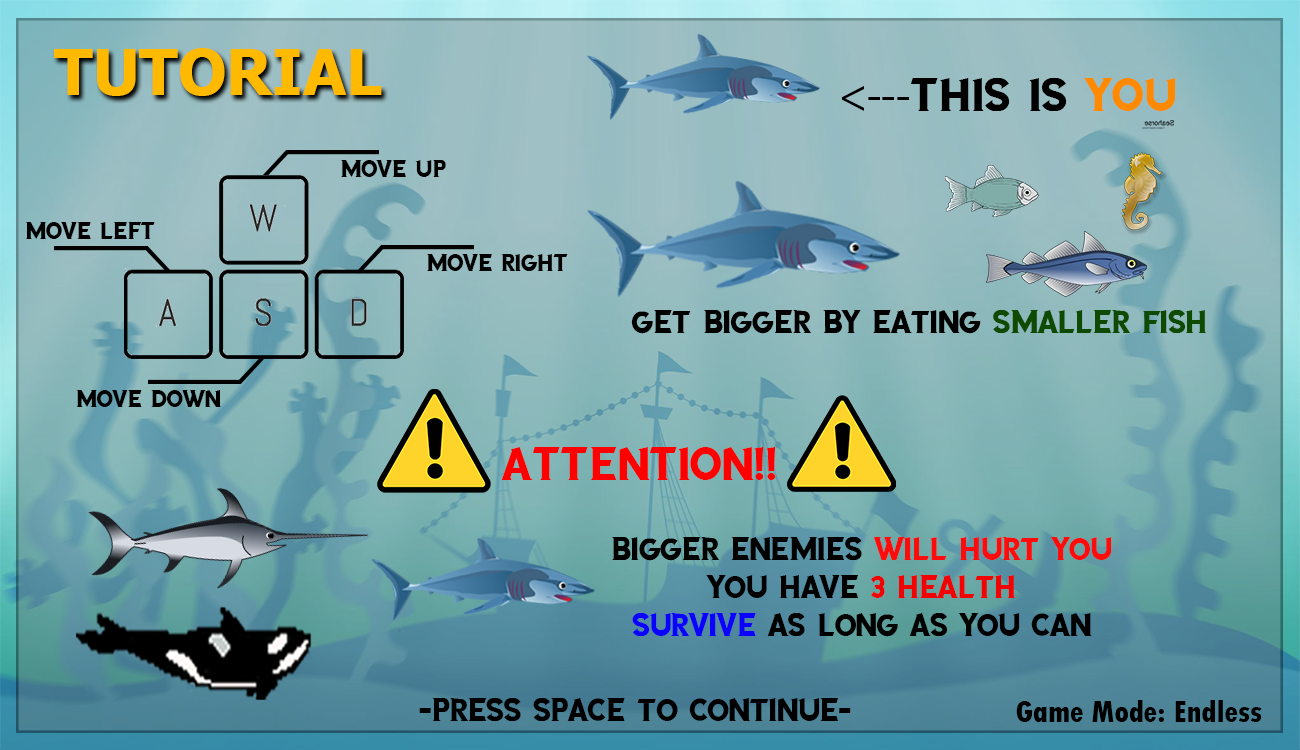
<style>
.page{position:relative;width:1300px;height:750px}
.page>*{position:absolute;margin:0}
.t1{font:63.1px "Tahoma-Bold";color:#ffba00}
.t2{font:47.3px "SEAGARDENS";color:#000000}
.t3{font:47.3px "MyriadPro-Regular";color:#000000}
.t4{font:47.3px "SEAGARDENS";color:#ff8a00}
.t5{font:23.6px "SEAGARDENS";color:#000000}
.t6{font:31.5px "SEAGARDENS";color:#000000}
.t7{font:31.5px "SEAGARDENS";color:#0e4a00}
.t8{font:47.3px "SEAGARDENS";color:#ff0000}
.t9{font:31.5px "SEAGARDENS";color:#fe0c0c}
.t10{font:31.5px "SEAGARDENS";color:#f20303}
.t11{font:31.5px "SEAGARDENS";color:#0c00ff}
.t12{font:31.5px "TwCenMT-CondensedExtraBold";color:#000000}
</style>
<div class="page">
<p class="t1" style="left:54px;top:48px;width:328px;height:48px">TUTORIAL</p>
<p class="t2" style="left:842px;top:78px;width:333px;height:33px"><span class="t3">&lt;---</span>This Is <span class="t4">yOu</span></p>
<p class="t5" style="left:341px;top:160px;width:105px;height:17px">move Up</p>
<p class="t5" style="left:26px;top:222px;width:129px;height:17px">move Left</p>
<p class="t5" style="left:427px;top:254px;width:141px;height:17px">move Right</p>
<p class="t6" style="left:631px;top:310px;width:575px;height:24px">gET bIGGER bY EATING <span class="t7">sMALLER fISH</span></p>
<p class="t5" style="left:76px;top:390px;width:145px;height:17px">move Down</p>
<p class="t8" style="left:501px;top:447px;width:275px;height:33px">ATTENTION!!</p>
<p class="t6" style="left:612px;top:537px;width:500px;height:100px;text-align:center">Bigger Enemies <span class="t9">Will hurt you</span><br>You HAVE <span class="t10">3 HEALTH<br></span><span class="t11">Survive</span> as Long as you can</p>
<p class="t6" style="left:419px;top:698px;width:432px;height:23px">-Press space to continue-</p>
<p class="t12" style="left:1016px;top:700px;width:246px;height:22px">Game Mode: Endless</p>
</div>
